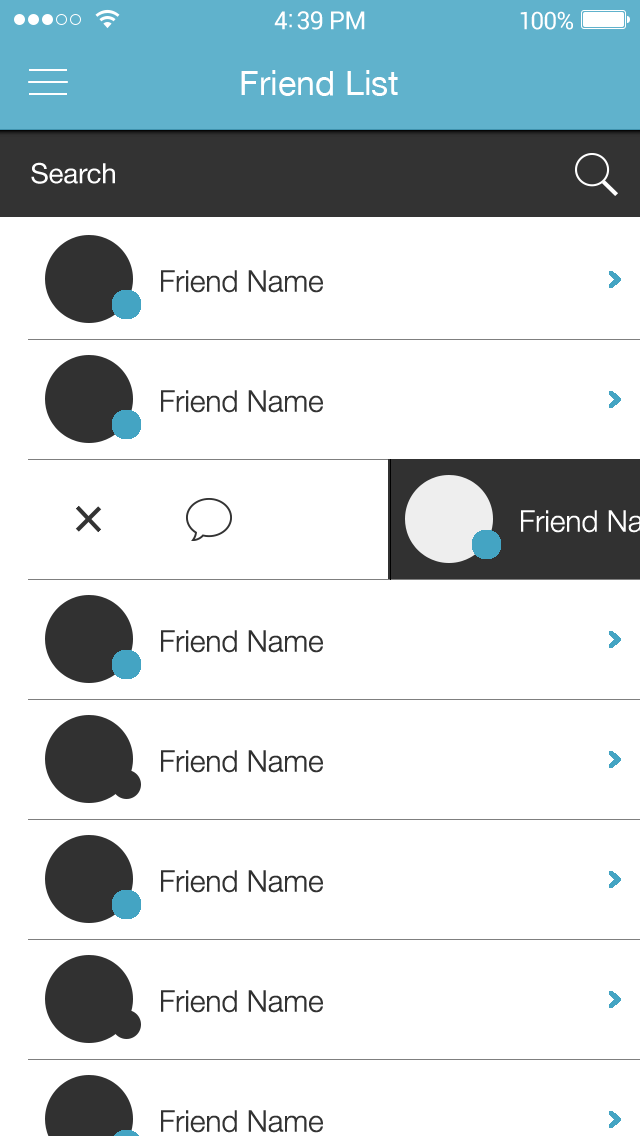
<style>
.page{position:relative;width:640px;height:1136px;background:#ffffff}
.page>*{position:absolute;margin:0}
.t1{font:34px "HelveticaNeue";color:#ffffff}
.t2{font:28px "HelveticaNeue";letter-spacing:-0.01em;color:#fefefe}
.t3{font:30px "HelveticaNeue-Light";color:#333333}
.t4{font:30px "HelveticaNeue-Light";color:#313131}
</style>
<div class="page">
<p class="t1" style="left:241px;top:70px;width:157px;height:26px">Friend List</p>
<p class="t2" style="left:31px;top:162px;width:84px;height:22px">Search</p>
<p class="t3" style="left:161px;top:270px;width:162px;height:23px">Friend Name</p>
<p class="t3" style="left:161px;top:390px;width:162px;height:23px">Friend Name</p>
<p class="t4" style="left:161px;top:630px;width:162px;height:23px">Friend Name</p>
<p class="t4" style="left:161px;top:750px;width:162px;height:23px">Friend Name</p>
<p class="t4" style="left:161px;top:870px;width:162px;height:23px">Friend Name</p>
<p class="t4" style="left:161px;top:990px;width:162px;height:23px">Friend Name</p>
<p class="t3" style="left:161px;top:1110px;width:162px;height:23px">Friend Name</p>
</div>
